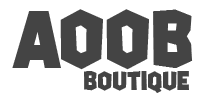
<style>
.page{position:relative;width:214px;height:100px;background:#ffffff}
.page>*{position:absolute;margin:0}
.t1{font:80px "Squirk";color:#444444}
.t2{font:26px "Squirk";color:#444444}
</style>
<div class="page">
<p class="t1" style="left:12px;top:9px;width:181px;height:61px">AOOB</p>
<p class="t2" style="left:84px;top:71px;width:105px;height:22px">BOUTIQUE</p>
</div>
